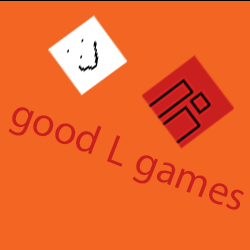
<style>
.page{position:relative;width:250px;height:250px;background:#f26522}
.page>*{position:absolute;margin:0}
.t1{font:57.9px "MyriadArabic-Regular";color:#ca1f1f}
</style>
<div class="page">
<p class="t1" style="left:8px;top:107px;width:236px;height:103px;rotate:21deg">good L games</p>
</div>
